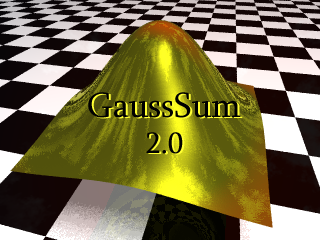
<style>
.page{position:relative;width:320px;height:240px}
.page>*{position:absolute;margin:0}
.t1{font:36px "Sylfaen";color:#000000}
.t2{font:30px "Sylfaen";color:#000000}
.t3{font:36px "Sylfaen"}
.t4{font:30px "Sylfaen"}
</style>
<div class="page">
<p class="t1" style="left:88px;top:92px;width:153px;height:62px;text-align:center">GaussSum<br><span class="t2">2.0</span></p>
<p class="t3" style="left:90px;top:93px;width:153px;height:62px;text-align:center">GaussSum<br><span class="t4">2.0</span></p>
</div>
